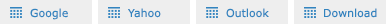
<style>
.page{position:relative;width:392px;height:24px;background:#eeeeee}
.page>*{position:absolute;margin:0}
.t1{font:11px "Verdana";color:#3284bf}
</style>
<div class="page">
<p class="t1" style="left:30px;top:8px;width:38px;height:12px">Google</p>
<p class="t1" style="left:128px;top:8px;width:33px;height:10px">Yahoo</p>
<p class="t1" style="left:226px;top:8px;width:43px;height:10px">Outlook</p>
<p class="t1" style="left:324px;top:8px;width:53px;height:10px">Download</p>
</div>
